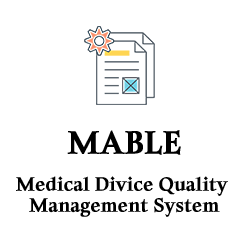
<style>
.page{position:relative;width:240px;height:240px;background:#ffffff}
.page>*{position:absolute;margin:0}
.t1{font:30px "HeirofLightBold";color:#000000;font-weight:bold}
.t2{font:18px "HeirofLightBold";color:#000000;font-weight:bold}
</style>
<div class="page">
<p class="t1" style="left:67px;top:130px;width:114px;height:25px">MABLE</p>
<p class="t2" style="left:16px;top:176px;width:212px;height:41px;text-align:center">Medical Divice Quality <br>Management System</p>
</div>
